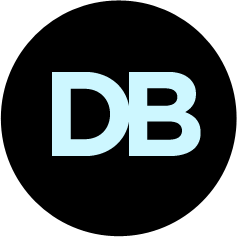
<style>
.page{position:relative;width:237px;height:237px;background:#000000}
.page>*{position:absolute;margin:0}
.t1{font:120px "Gotham-Bold";color:#cdf7ff}
</style>
<div class="page">
<p class="t1" style="left:52px;top:72px;width:149px;height:84px">DB</p>
</div>
